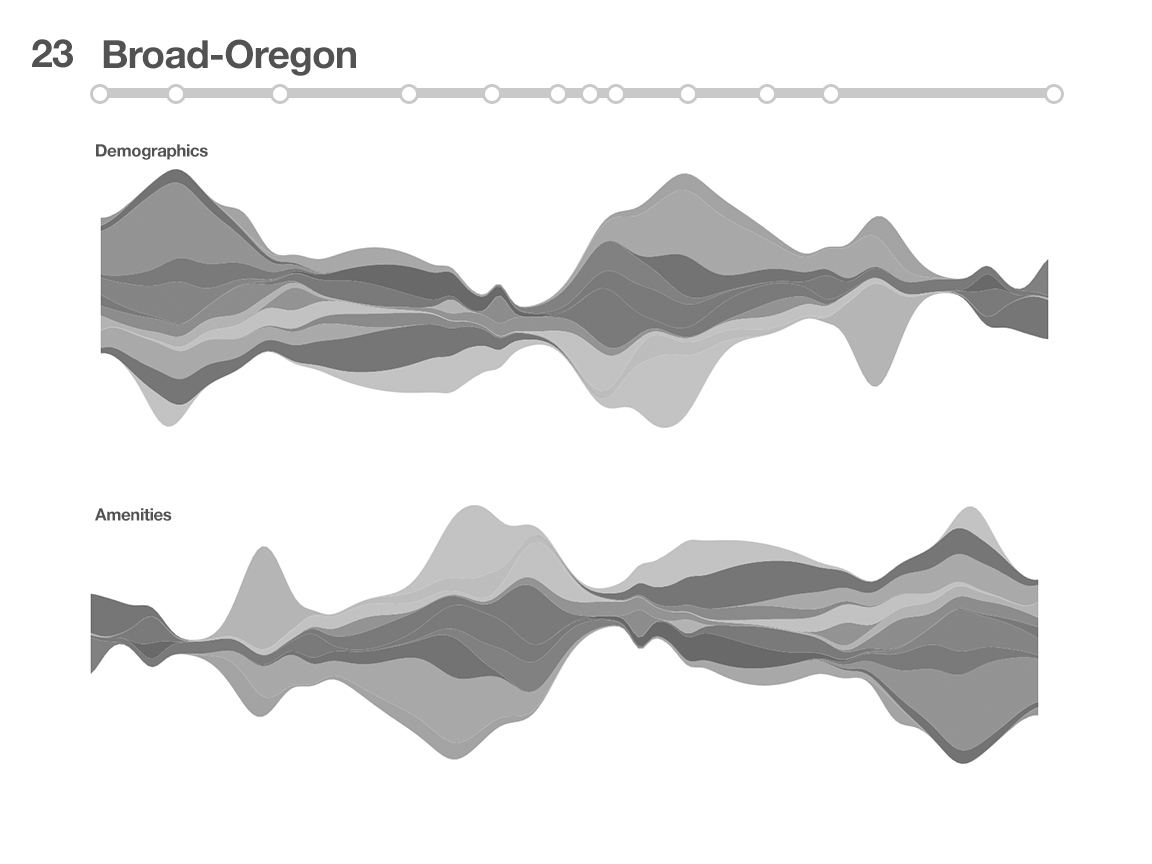
<style>
.page{position:relative;width:1152px;height:864px;background:#ffffff}
.page>*{position:absolute;margin:0}
.t1{font:39px "HelveticaNeue-Bold";letter-spacing:-0.02em;color:#525252}
.t2{font:17px "HelveticaNeue-Bold";letter-spacing:-0.02em;color:#525252}
</style>
<div class="page">
<p class="t1" style="left:32px;top:39px;width:41px;height:29px">23</p>
<p class="t1" style="left:103px;top:39px;width:253px;height:37px">Broad-Oregon</p>
<p class="t2" style="left:96px;top:144px;width:112px;height:16px">Demographics</p>
<p class="t2" style="left:95px;top:508px;width:77px;height:13px">Amenities</p>
</div>
